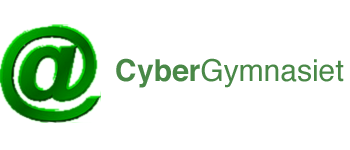
<style>
.page{position:relative;width:350px;height:150px;background:#ffffff}
.page>*{position:absolute;margin:0}
.t1{font:30px "Helvetica";color:#498847}
.t2{font:30px "Helvetica-Bold";color:#498847}
</style>
<div class="page">
<p class="t1" style="left:116px;top:58px;width:228px;height:30px"><span class="t2">Cyber</span>Gymnasiet</p>
</div>
